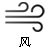
<style>
.page{position:relative;width:50px;height:48px;background:#ffffff}
.page>*{position:absolute;margin:0}
.t1{font:12px "OPPOSans-R";color:#000000}
</style>
<div class="page">
<p class="t1" style="left:19px;top:37px;width:12px;height:10px">风</p>
</div>
